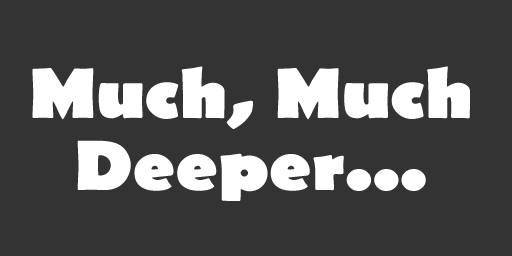
<style>
.page{position:relative;width:512px;height:256px;background:#333333}
.page>*{position:absolute;margin:0}
.t1{font:72px/72px "BerlinSansFB-Bold";color:#ffffff;scale:1.1 1}
</style>
<div class="page">
<p class="t1" style="left:32px;top:66px;width:438px;height:135px;text-align:center">Much, Much<br>Deeper...</p>
</div>
